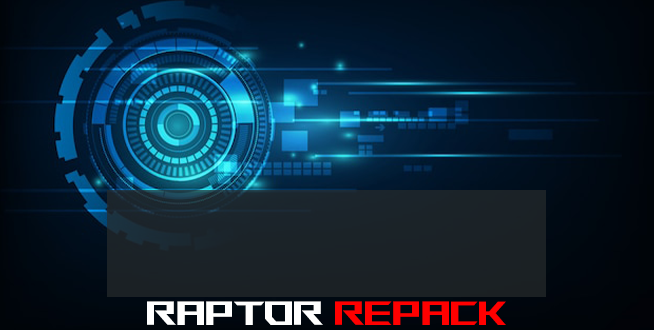
<style>
.page{position:relative;width:654px;height:330px}
.page>*{position:absolute;margin:0}
.t1{font:33.3px "ROGFonts-Regular";color:#ffffff}
.t2{font:33.3px "ROGFonts-Regular";color:#ff0000}
</style>
<div class="page">
<p class="t1" style="left:147px;top:301px;width:359px;height:24px">Raptor <span class="t2">Repack</span></p>
</div>
